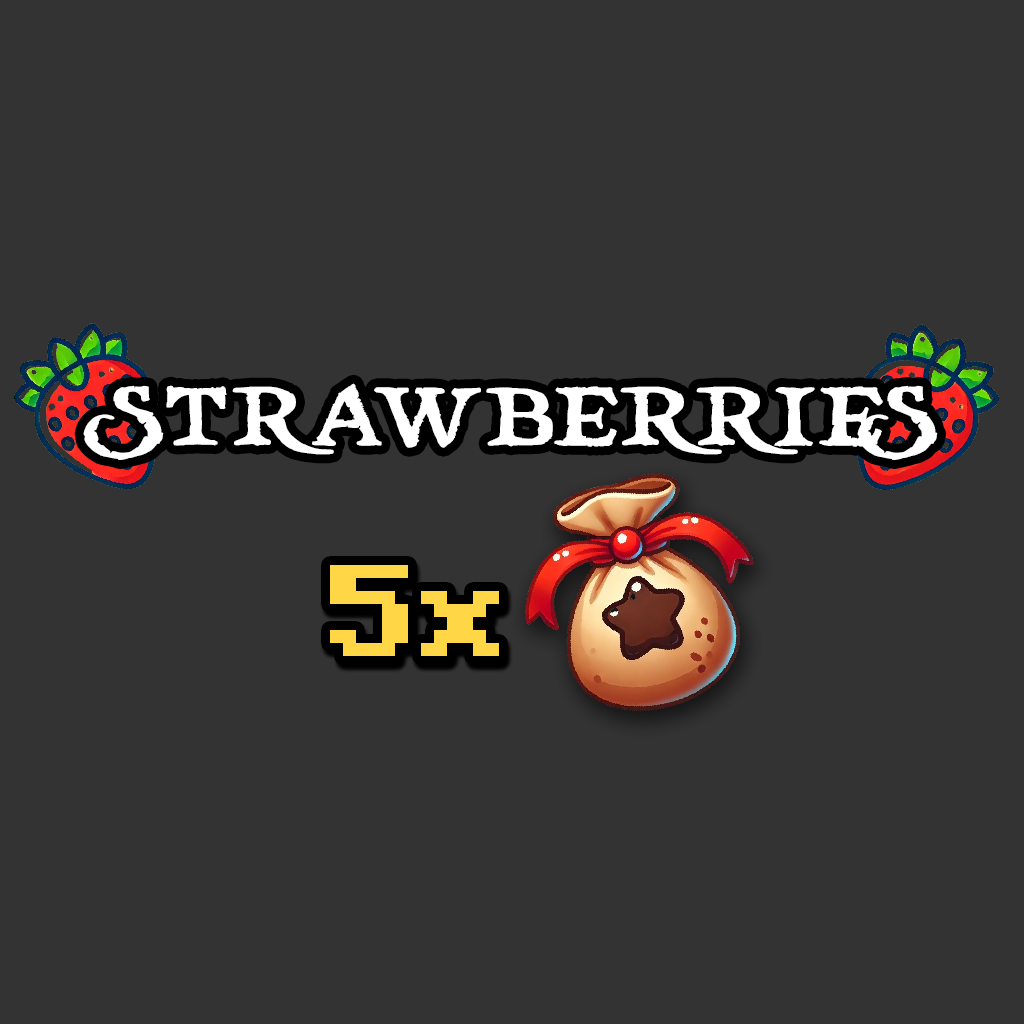
<style>
.page{position:relative;width:1024px;height:1024px;background:#333333}
.page>*{position:absolute;margin:0}
.t1{font:83.4px "treasuremap";color:#ffffff}
.t2{font:130px "Minecraft-Bold";color:#ffd646}
</style>
<div class="page">
<p class="t1" style="left:83px;top:383px;width:855px;height:77px">STRAWBERRIES</p>
<p class="t2" style="left:330px;top:565px;width:169px;height:91px">5x</p>
</div>
